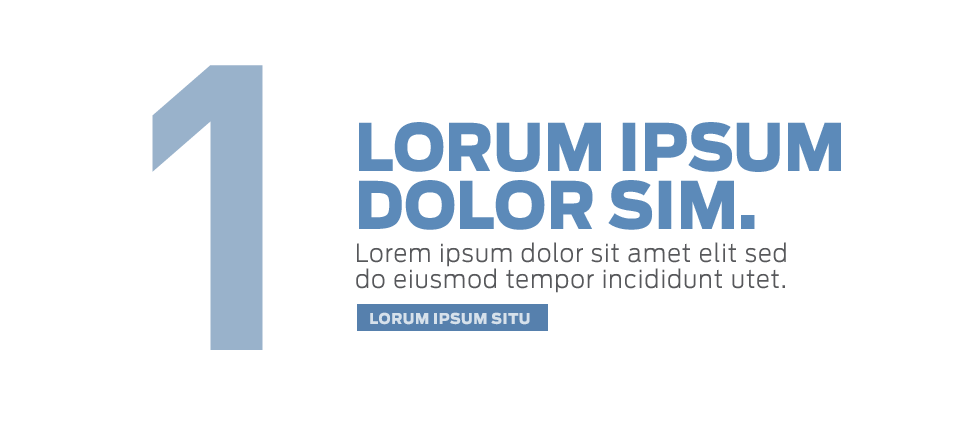
<style>
.page{position:relative;width:960px;height:440px;background:#ffffff}
.page>*{position:absolute;margin:0}
.t1{font:400px "DINBold";letter-spacing:0.005em;color:#99b2cb}
.t2{font:65px/58px "Antenna-Black";letter-spacing:0.005em;color:#5c8ab9;scale:0.93 1}
.t3{font:25px/26px "Antenna-Light";letter-spacing:0.044em;color:#57585b;scale:0.93 1}
.t4{font:15px "Antenna-Black";letter-spacing:0.04em;color:#d6e1eb;scale:0.93 1}
</style>
<div class="page">
<p class="t1" style="left:152px;top:65px;width:111px;height:285px">1</p>
<p class="t2" style="left:359px;top:122px;width:482px;height:108px">LORUM IPSUM<br>DOLOR SIM.</p>
<p class="t3" style="left:356px;top:242px;width:430px;height:51px">Lorem ipsum dolor sit amet elit sed<br>do eiusmod tempor incididunt utet.</p>
<p class="t4" style="left:370px;top:312px;width:160px;height:13px">LORUM IPSUM SITU</p>
</div>
